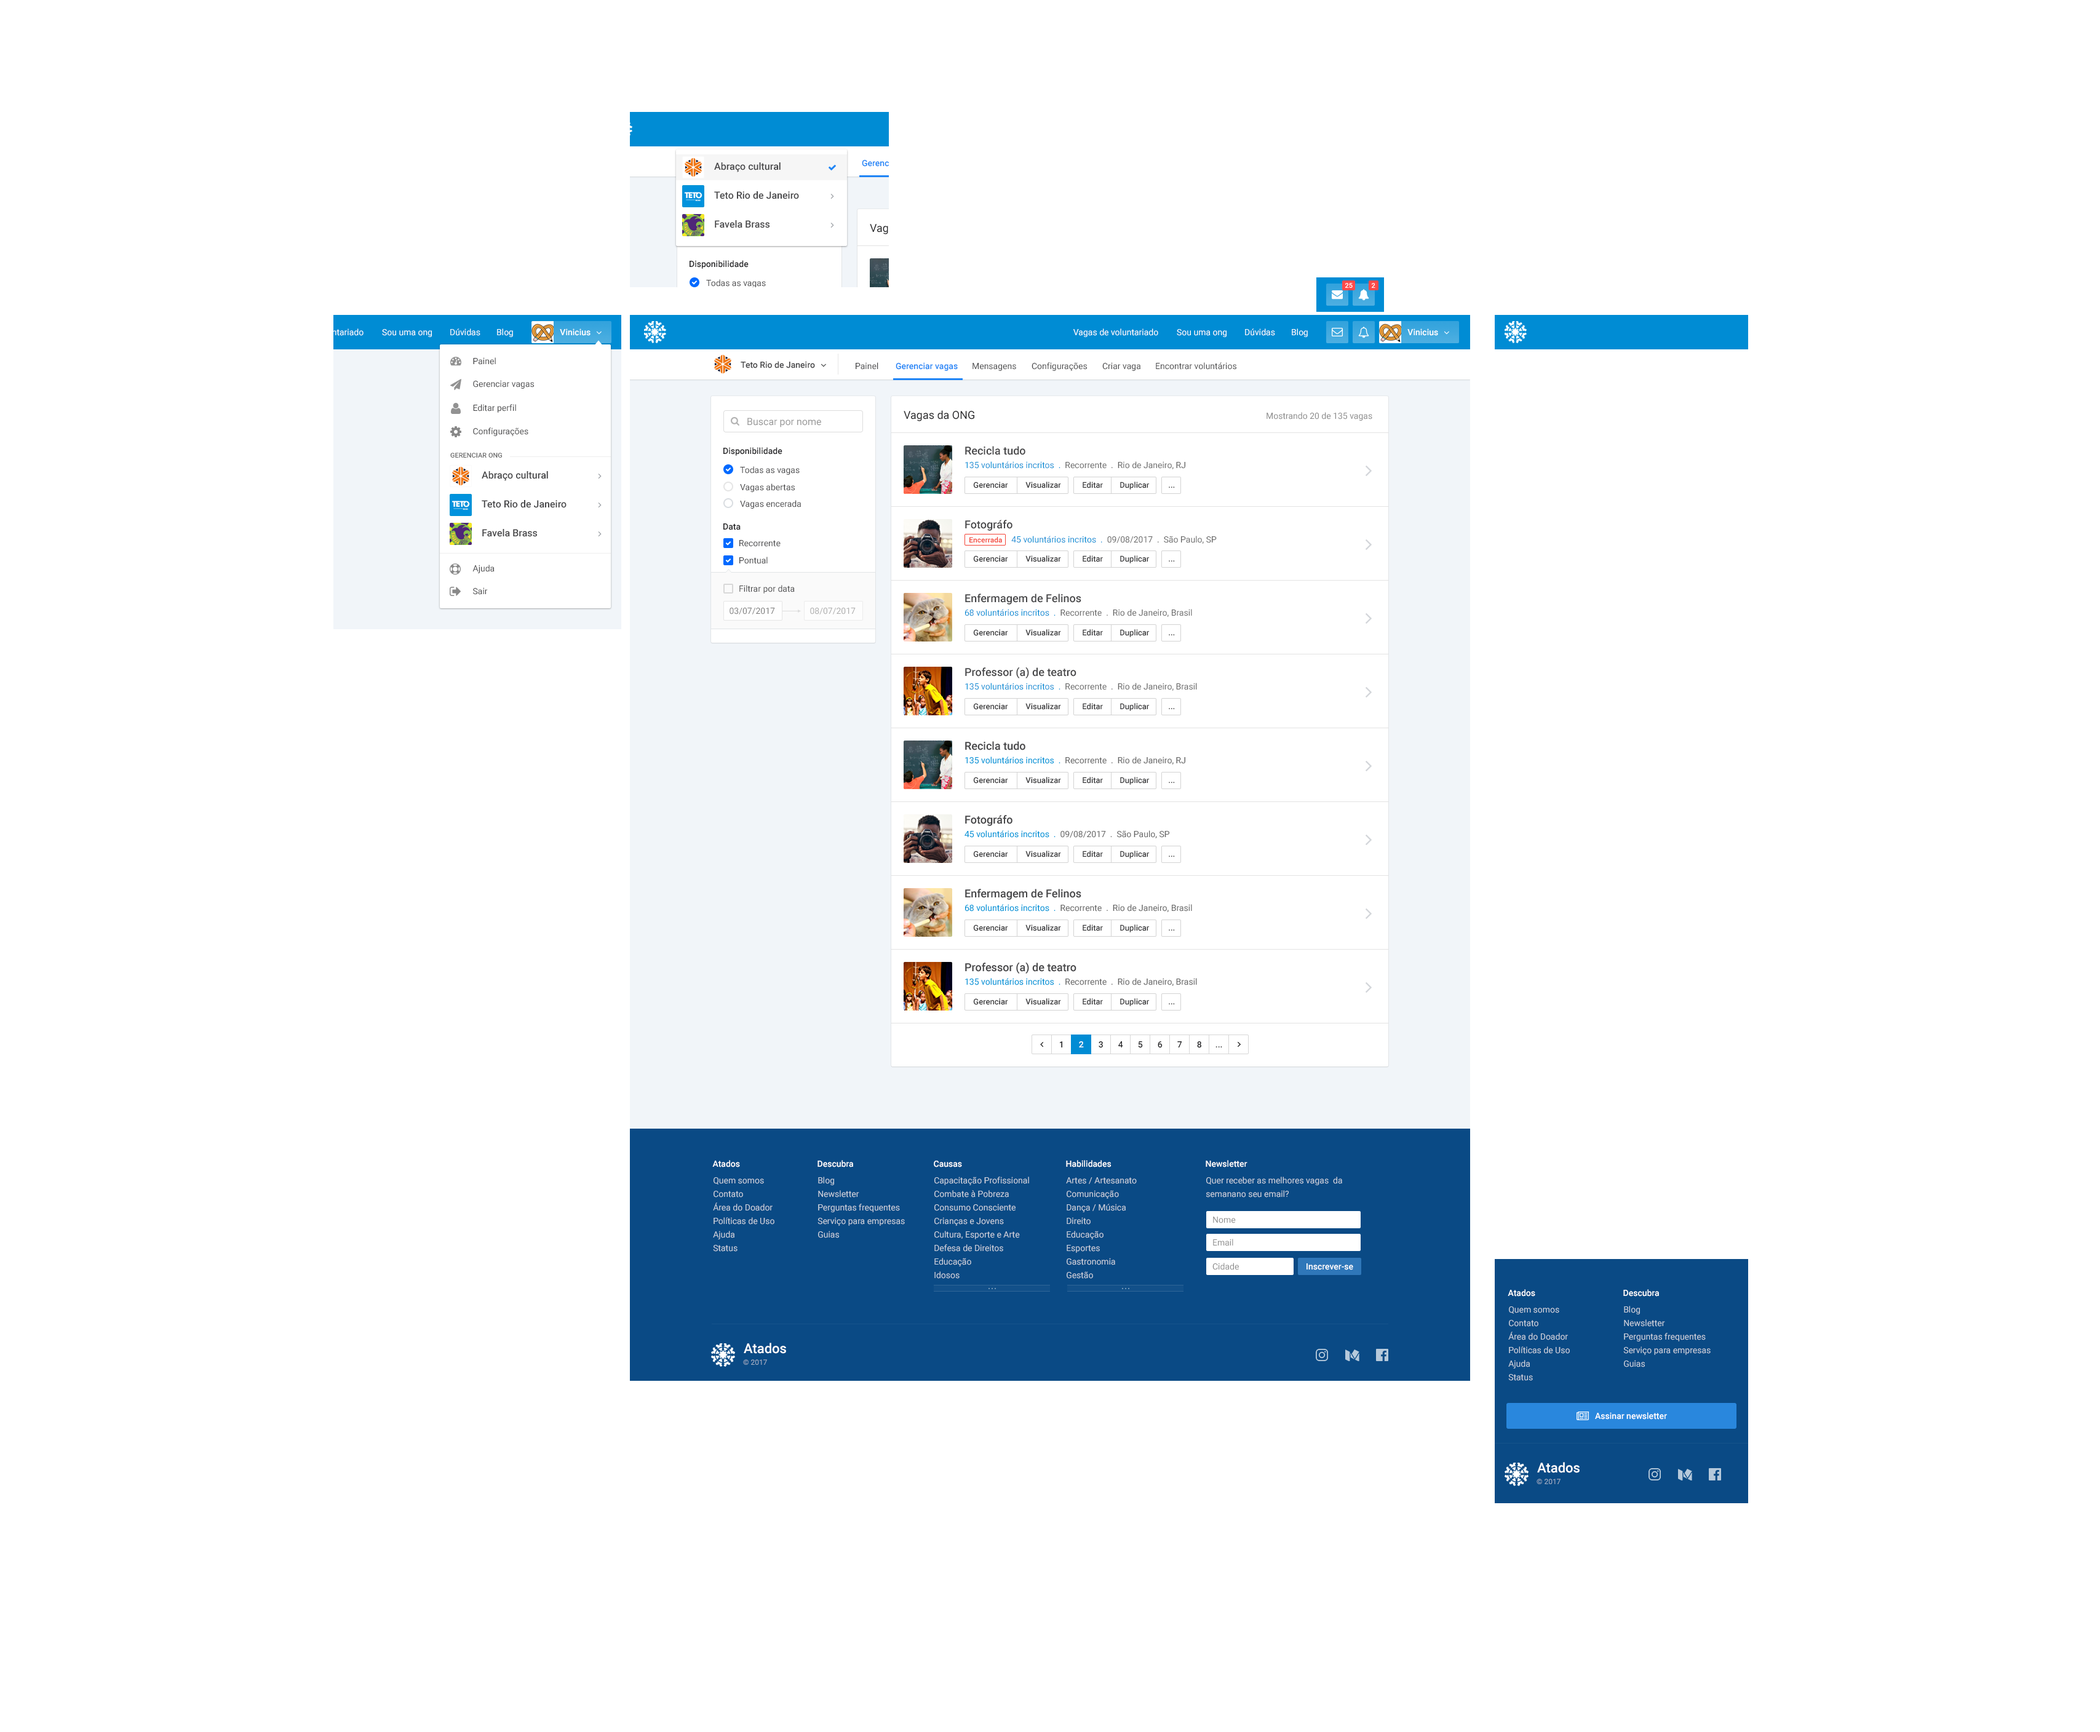
<style>
.page{position:relative;width:2100px;height:1732px;background:#ffffff}
.page>*{position:absolute;margin:0}
.t1{font:9.8px "Roboto-Medium";color:#464648}
.t2{font:6.8px "Roboto-Medium";color:#ffffff}
.t3{font:8.6px "Roboto-Medium";color:#ffffff}
.t4{font:8.6px "Roboto-Regular";color:#464648}
.t5{font:8.6px "Roboto-Medium";color:#464648}
.t6{font:8.6px "Roboto-Medium";color:#2085f6}
.t7{font:11.1px "Roboto-Regular";color:#262628}
.t8{font:8.6px "Roboto-Regular";color:#888888}
.t9{font:9.8px "Roboto-Regular";color:#999999}
.t10{font:8.6px "Roboto-Medium";color:#262628}
.t11{font:8.6px/13.5px "Roboto-Regular";color:#666666}
.t12{font:11.1px "Roboto-Medium";color:#464648}
.t13{font:8.6px/13.5px "Roboto-Regular";color:#008cd4}
.t14{font:6.8px "Roboto-Medium";color:#666666;text-transform:uppercase}
.t15{font:8px "Roboto-Medium";color:#363638}
.t16{font:8.6px/14.1px "Roboto-Regular";color:#666666}
.t17{font:8.6px/14.1px "Roboto-Regular";color:#008cd4}
.t18{font:7.4px "Roboto-Medium";color:#f44336}
.t19{font:8.6px "Roboto-Regular";color:#7a7a7a}
.t20{font:8.6px "Roboto-Regular";color:#acacac}
</style>
<div class="page">
<p class="t1" style="left:714px;top:162px;width:67px;height:10px">Abraço cultural</p>
<p class="t1" style="left:714px;top:191px;width:85px;height:8px">Teto Rio de Janeiro</p>
<p class="t1" style="left:715px;top:220px;width:55px;height:8px">Favela Brass</p>
<p class="t2" style="left:1345px;top:283px;width:8px;height:5px">25</p>
<p class="t2" style="left:1372px;top:283px;width:4px;height:5px">2</p>
<p class="t3" style="left:1407px;top:328px;width:31px;height:8px">Vinicius</p>
<p class="t4" style="left:473px;top:357px;width:23px;height:8px">Painel</p>
<p class="t5" style="left:741px;top:361px;width:74px;height:7px">Teto Rio de Janeiro</p>
<p class="t4" style="left:856px;top:362px;width:22px;height:8px">Painel</p>
<p class="t6" style="left:896px;top:362px;width:62px;height:9px">Gerenciar vagas</p>
<p class="t4" style="left:973px;top:363px;width:43px;height:8px">Mensagens</p>
<p class="t4" style="left:1032px;top:362px;width:55px;height:9px">Configurações</p>
<p class="t4" style="left:1102px;top:362px;width:39px;height:9px">Criar vaga</p>
<p class="t4" style="left:1156px;top:362px;width:80px;height:8px">Encontrar voluntários</p>
<p class="t4" style="left:473px;top:380px;width:61px;height:9px">Gerenciar vagas</p>
<p class="t4" style="left:473px;top:404px;width:43px;height:9px">Editar perfil</p>
<p class="t7" style="left:904px;top:410px;width:70px;height:11px">Vagas da ONG</p>
<p class="t8" style="left:1267px;top:412px;width:105px;height:9px">Mostrando 20 de 135 vagas</p>
<p class="t9" style="left:747px;top:418px;width:74px;height:10px">Buscar por nome</p>
<p class="t4" style="left:473px;top:428px;width:55px;height:8px">Configurações</p>
<p class="t10" style="left:723px;top:447px;width:59px;height:9px">Disponibilidade</p>
<p class="t11" style="left:965px;top:446px;width:220px;height:23px"><span class="t12">Recicla tudo<br></span><span class="t13">135 voluntários incritos  .  </span>Recorrente  .  Rio de Janeiro, RJ</p>
<p class="t14" style="left:450px;top:453px;width:52px;height:5px">Gerenciar ong</p>
<p class="t1" style="left:482px;top:471px;width:66px;height:10px">Abraço cultural</p>
<p class="t4" style="left:740px;top:466px;width:60px;height:9px">Todas as vagas</p>
<p class="t4" style="left:740px;top:484px;width:55px;height:8px">Vagas abertas</p>
<p class="t15" style="left:973px;top:482px;width:35px;height:6px">Gerenciar</p>
<p class="t15" style="left:1025px;top:482px;width:36px;height:6px">Visualizar</p>
<p class="t15" style="left:1083px;top:482px;width:20px;height:6px">Editar</p>
<p class="t15" style="left:1120px;top:482px;width:29px;height:8px">Duplicar</p>
<p class="t15" style="left:1169px;top:487px;width:6px;height:1px">...</p>
<p class="t1" style="left:482px;top:500px;width:85px;height:8px">Teto Rio de Janeiro</p>
<p class="t4" style="left:740px;top:500px;width:61px;height:9px">Vagas encerada</p>
<p class="t16" style="left:965px;top:520px;width:252px;height:24px"><span class="t12">Fotográfo<br></span><span class="t17">                      45 voluntários incritos  .  </span>09/08/2017  .  São Paulo, SP</p>
<p class="t1" style="left:482px;top:529px;width:55px;height:8px">Favela Brass</p>
<p class="t10" style="left:723px;top:524px;width:18px;height:6px">Data</p>
<p class="t4" style="left:739px;top:540px;width:42px;height:7px">Recorrente</p>
<p class="t18" style="left:969px;top:537px;width:33px;height:6px">Encerrada</p>
<p class="t4" style="left:739px;top:557px;width:29px;height:7px">Pontual</p>
<p class="t15" style="left:973px;top:555px;width:35px;height:7px">Gerenciar</p>
<p class="t15" style="left:1025px;top:555px;width:36px;height:7px">Visualizar</p>
<p class="t15" style="left:1083px;top:555px;width:20px;height:7px">Editar</p>
<p class="t15" style="left:1120px;top:555px;width:29px;height:8px">Duplicar</p>
<p class="t4" style="left:472px;top:565px;width:23px;height:8px">Ajuda</p>
<p class="t15" style="left:1169px;top:560px;width:6px;height:2px">...</p>
<p class="t4" style="left:473px;top:587px;width:15px;height:8px">Sair</p>
<p class="t4" style="left:739px;top:585px;width:56px;height:9px">Filtrar por data</p>
<p class="t11" style="left:965px;top:594px;width:227px;height:23px"><span class="t12">Enfermagem de Felinos<br></span><span class="t13">68 voluntários incritos  .  </span>Recorrente  .  Rio de Janeiro, Brasil</p>
<p class="t19" style="left:730px;top:608px;width:45px;height:7px">03/07/2017</p>
<p class="t20" style="left:810px;top:608px;width:46px;height:7px">08/07/2017</p>
<p class="t15" style="left:973px;top:629px;width:35px;height:7px">Gerenciar</p>
<p class="t15" style="left:1025px;top:629px;width:36px;height:7px">Visualizar</p>
<p class="t15" style="left:1083px;top:629px;width:20px;height:7px">Editar</p>
<p class="t15" style="left:1120px;top:629px;width:29px;height:8px">Duplicar</p>
<p class="t15" style="left:1169px;top:634px;width:6px;height:1px">...</p>
<p class="t11" style="left:965px;top:667px;width:232px;height:24px"><span class="t12">Professor (a) de teatro<br></span><span class="t13">135 voluntários incritos  .  </span>Recorrente  .  Rio de Janeiro, Brasil</p>
<p class="t15" style="left:973px;top:703px;width:35px;height:7px">Gerenciar</p>
<p class="t15" style="left:1025px;top:703px;width:36px;height:7px">Visualizar</p>
<p class="t15" style="left:1083px;top:703px;width:20px;height:7px">Editar</p>
<p class="t15" style="left:1120px;top:703px;width:29px;height:8px">Duplicar</p>
<p class="t15" style="left:1169px;top:708px;width:6px;height:1px">...</p>
<p class="t10" style="left:1060px;top:1041px;width:2px;height:7px">1</p>
<p class="t3" style="left:1079px;top:1041px;width:5px;height:7px">2</p>
<p class="t10" style="left:1099px;top:1041px;width:4px;height:7px">3</p>
<p class="t10" style="left:1118px;top:1041px;width:5px;height:7px">4</p>
<p class="t10" style="left:1138px;top:1041px;width:5px;height:7px">5</p>
<p class="t10" style="left:1158px;top:1041px;width:5px;height:7px">6</p>
<p class="t10" style="left:1177px;top:1041px;width:5px;height:7px">7</p>
<p class="t10" style="left:1197px;top:1041px;width:4px;height:7px">8</p>
<p class="t10" style="left:1216px;top:1046px;width:6px;height:2px">...</p>
</div>
